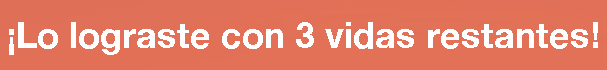
<style>
.page{position:relative;width:607px;height:70px;background:#e27157}
.page>*{position:absolute;margin:0}
.t1{font:36px "HelveticaNeue-Bold";color:#ffffff}
</style>
<div class="page">
<p class="t1" style="left:9px;top:22px;width:589px;height:33px">¡Lo lograste con 3 vidas restantes!</p>
</div>
